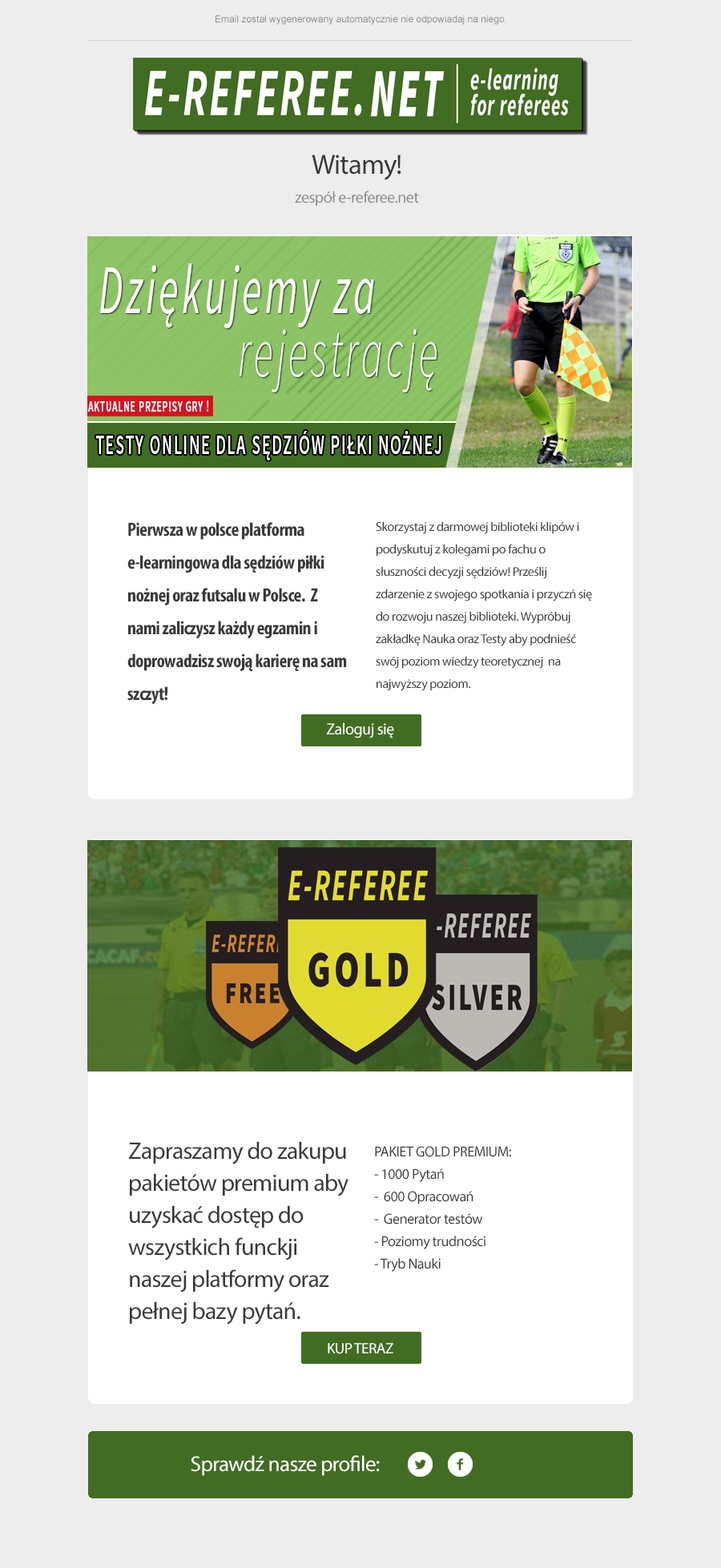
<style>
.page{position:relative;width:721px;height:1568px;background:#ededed}
.page>*{position:absolute;margin:0}
.t1{font:9.6px "ArialMT";color:#8f8f8f}
.t2{font:16px/28.8px "MyriadPro-Regular";letter-spacing:-0.025em;color:#8b8b8b}
.t3{font:28px/28.8px "MyriadPro-Regular";letter-spacing:-0.025em;color:#393939}
.t4{font:12.8px/22.4px "MyriadPro-Regular";letter-spacing:-0.025em;color:#393939}
.t5{font:19.2px/32.8px "MyriadPro-BoldCond";letter-spacing:-0.025em;color:#393939}
.t6{font:16px "MyriadPro-Regular";letter-spacing:-0.025em;color:#ffffff}
.t7{font:24px/32px "MyriadPro-Regular";letter-spacing:-0.025em;color:#393939}
.t8{font:14.4px/22.4px "MyriadPro-Regular";letter-spacing:-0.025em;color:#393939}
.t9{font:15.2px "MyriadPro-Regular";letter-spacing:-0.025em;color:#ffffff}
.t10{font:21.6px "MyriadPro-Regular";letter-spacing:-0.025em;color:#ffffff}
</style>
<div class="page">
<p class="t1" style="left:215px;top:15px;width:291px;height:10px">Email został wygenerowany automatycznie nie odpowiadaj na niego.</p>
<p class="t2" style="left:295px;top:155px;width:124px;height:51px;text-align:center"><span class="t3">Witamy!<br></span>zespół e-referee.net</p>
<p class="t4" style="left:376px;top:521px;width:216px;height:170px">Skorzystaj z darmowej biblioteki klipów i podyskutuj z kolegami po fachu o słuszności decyzji sędziów! Prześlij zdarzenie z swojego spotkania i przyczń się do rozwoju naszej biblioteki. Wypróbuj zakładkę Nauka oraz Testy aby podnieść swój poziom wiedzy teoretycznej  na najwyższy poziom.</p>
<p class="t5" style="left:127px;top:522px;width:220px;height:183px">Pierwsza w polsce platforma e-learningowa dla sędziów piłki nożnej oraz futsalu w Polsce.  Z nami zaliczysz każdy egzamin i doprowadzisz swoją karierę na sam szczyt!</p>
<p class="t6" style="left:326px;top:722px;width:68px;height:16px">Zaloguj się</p>
<p class="t7" style="left:128px;top:1141px;width:220px;height:184px">Zapraszamy do zakupu pakietów premium aby uzyskać dostęp do wszystkich funckji naszej platformy oraz pełnej bazy pytań.</p>
<p class="t8" style="left:374px;top:1146px;width:137px;height:126px">PAKIET GOLD PREMIUM:<br>- 1000 Pytań<br>-  600 Opracowań <br>-  Generator testów<br>- Poziomy trudności<br>- Tryb Nauki</p>
<p class="t9" style="left:328px;top:1343px;width:65px;height:11px">KUP TERAZ</p>
<p class="t10" style="left:191px;top:1455px;width:189px;height:21px">Sprawdź nasze profile:</p>
</div>
